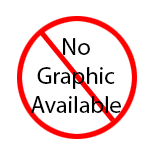
<style>
.page{position:relative;width:150px;height:150px;background:#ffffff}
.page>*{position:absolute;margin:0}
.t1{font:24px "MyriadPro-Regular";color:#000000}
</style>
<div class="page">
<p class="t1" style="left:31px;top:38px;width:90px;height:75px;text-align:center">No<br>Graphic<br>Available</p>
</div>
